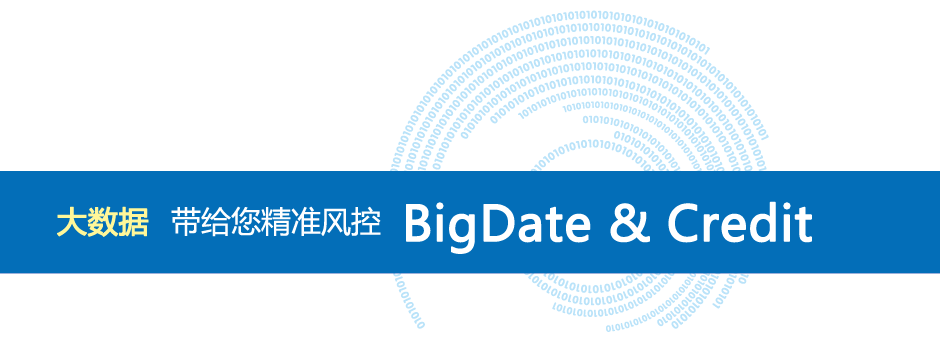
<style>
.page{position:relative;width:940px;height:344px;background:#ffffff}
.page>*{position:absolute;margin:0}
.t1{font:30px "MicrosoftYaHei";color:#fff799;font-weight:bold}
.t2{font:30px "MicrosoftYaHei";color:#fefefe}
.t3{font:48px "MicrosoftYaHei";color:#ffffff;font-weight:bold}
</style>
<div class="page">
<p class="t1" style="left:57px;top:206px;width:92px;height:31px">大数据</p>
<p class="t2" style="left:171px;top:206px;width:210px;height:31px">带给您精准风控</p>
<p class="t3" style="left:406px;top:201px;width:406px;height:53px">BigDate &amp; Credit</p>
</div>
